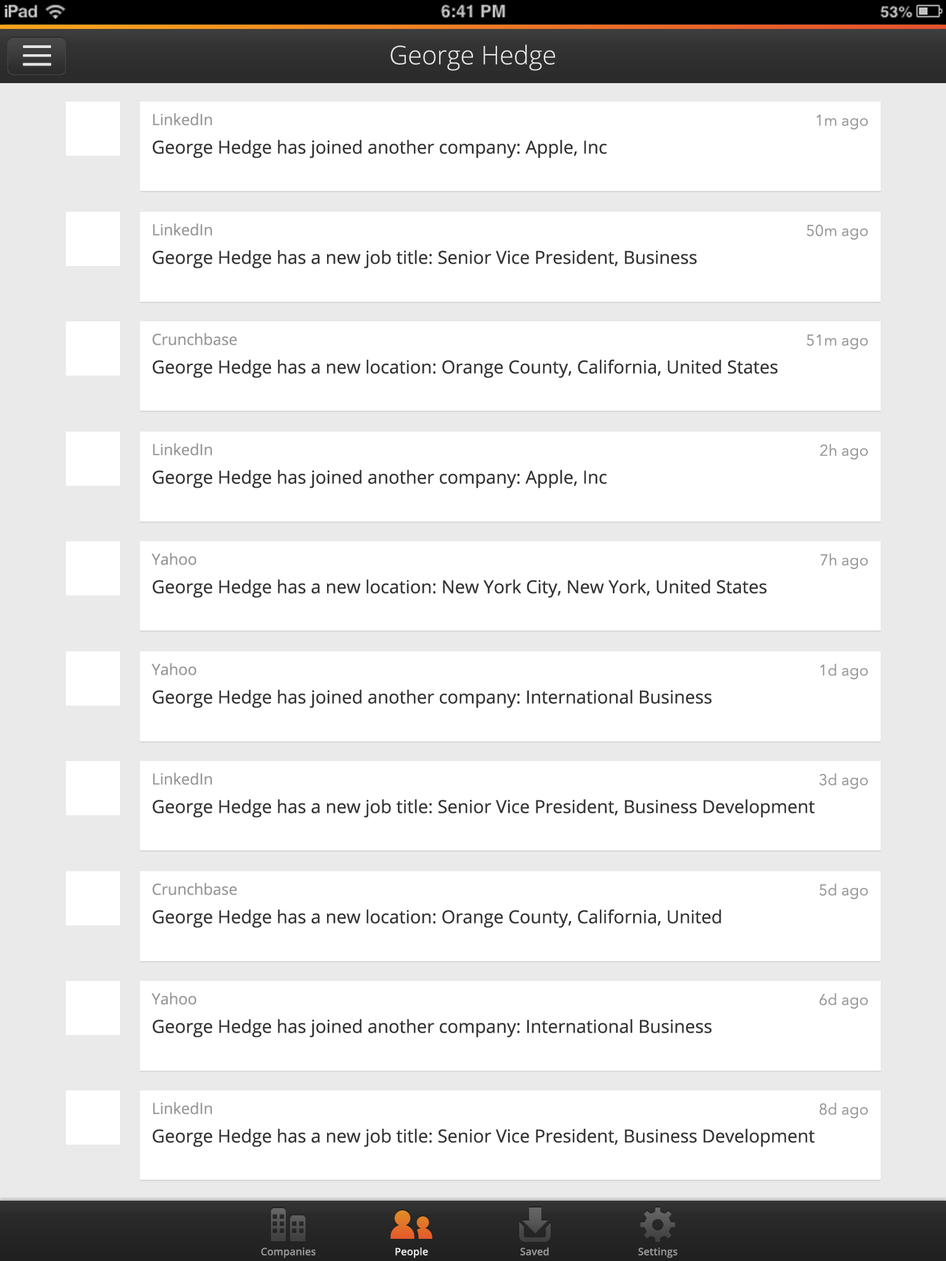
<style>
.page{position:relative;width:946px;height:1261px;background:#ffffff}
.page>*{position:absolute;margin:0}
.t1{font:25.7px "OpenSans-Light";color:#e5e5e5}
.t2{font:18px "OpenSans";color:#343434}
.t3{font:15.4px "OpenSans";color:#969696}
.t4{font:15.4px "AvenirNext-Regular";color:#969696}
.t5{font:10.3px "OpenSans-Semibold";color:#969696}
.t6{font:10.3px "OpenSans-Semibold";color:#e5e5e5}
</style>
<div class="page">
<p class="t1" style="left:390px;top:44px;width:165px;height:27px">George Hedge</p>
<p class="t2" style="left:153px;top:113px;width:453px;height:45px"><span class="t3">LinkedIn<br></span>George Hedge has joined another company: Apple, Inc</p>
<p class="t4" style="left:816px;top:115px;width:51px;height:15px">1m ago</p>
<p class="t2" style="left:153px;top:223px;width:543px;height:45px"><span class="t3">LinkedIn<br></span>George Hedge has a new job title: Senior Vice President, Business Development</p>
<p class="t4" style="left:807px;top:224px;width:60px;height:16px">50m ago</p>
<p class="t2" style="left:152px;top:333px;width:626px;height:45px"><span class="t3">Crunchbase<br></span>George Hedge has a new location: Orange County, California, United States</p>
<p class="t4" style="left:807px;top:334px;width:60px;height:16px">51m ago</p>
<p class="t2" style="left:153px;top:443px;width:453px;height:45px"><span class="t3">LinkedIn<br></span>George Hedge has joined another company: Apple, Inc</p>
<p class="t4" style="left:819px;top:444px;width:48px;height:16px">2h ago</p>
<p class="t2" style="left:151px;top:553px;width:616px;height:45px"><span class="t3">Yahoo<br></span>George Hedge has a new location: New York City, New York, United States</p>
<p class="t4" style="left:820px;top:553px;width:47px;height:17px">7h ago</p>
<p class="t2" style="left:151px;top:663px;width:561px;height:45px"><span class="t3">Yahoo<br></span>George Hedge has joined another company: International Business Machines</p>
<p class="t4" style="left:820px;top:664px;width:47px;height:16px">1d ago</p>
<p class="t2" style="left:153px;top:773px;width:662px;height:45px"><span class="t3">LinkedIn<br></span>George Hedge has a new job title: Senior Vice President, Business Development</p>
<p class="t4" style="left:819px;top:773px;width:48px;height:16px">3d ago</p>
<p class="t2" style="left:152px;top:883px;width:569px;height:45px"><span class="t3">Crunchbase<br></span>George Hedge has a new location: Orange County, California, United States</p>
<p class="t4" style="left:819px;top:884px;width:48px;height:16px">5d ago</p>
<p class="t2" style="left:151px;top:992px;width:561px;height:45px"><span class="t3">Yahoo<br></span>George Hedge has joined another company: International Business Machines</p>
<p class="t4" style="left:819px;top:993px;width:48px;height:16px">6d ago</p>
<p class="t2" style="left:153px;top:1102px;width:662px;height:45px"><span class="t3">LinkedIn<br></span>George Hedge has a new job title: Senior Vice President, Business Development</p>
<p class="t4" style="left:819px;top:1103px;width:48px;height:16px">8d ago</p>
<p class="t5" style="left:261px;top:1247px;width:55px;height:11px">Companies</p>
<p class="t6" style="left:395px;top:1247px;width:33px;height:11px">People</p>
<p class="t5" style="left:520px;top:1247px;width:29px;height:8px">Saved</p>
<p class="t5" style="left:638px;top:1247px;width:39px;height:11px">Settings</p>
</div>
